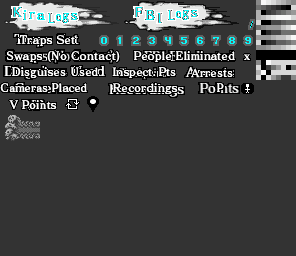
<style>
.page{position:relative;width:296px;height:256px;background:#333333}
.page>*{position:absolute;margin:0}
.t1{font:11px "MatisseVPro-DB";letter-spacing:0.025em;color:#ffffff}
.t2{font:11px "MatisseVPro-DB";letter-spacing:0.01em;color:#ffffff}
.t3{font:11px "MatisseVPro-DB";color:#ffffff}
.t4{font:11px "MatisseVPro-DB";letter-spacing:-0.01em;color:#ffffff}
</style>
<div class="page">
<p class="t1" style="left:19px;top:35px;width:56px;height:11px">Traps Set</p>
<p class="t1" style="left:7px;top:51px;width:113px;height:11px">Swaps (No Contact)</p>
<p class="t2" style="left:134px;top:51px;width:101px;height:11px">People Eliminated</p>
<p class="t1" style="left:244px;top:54px;width:6px;height:6px">x</p>
<p class="t1" style="left:12px;top:67px;width:86px;height:11px">Disguises Used</p>
<p class="t3" style="left:112px;top:67px;width:64px;height:11px">Inspect. Pts</p>
<p class="t1" style="left:191px;top:68px;width:42px;height:10px">Arrests</p>
<p class="t4" style="left:0px;top:83px;width:87px;height:9px">Cameras Placed</p>
<p class="t1" style="left:113px;top:83px;width:65px;height:11px">Recordings</p>
<p class="t3" style="left:217px;top:83px;width:7px;height:9px">P</p>
<p class="t3" style="left:9px;top:100px;width:48px;height:9px">V Points</p>
</div>
